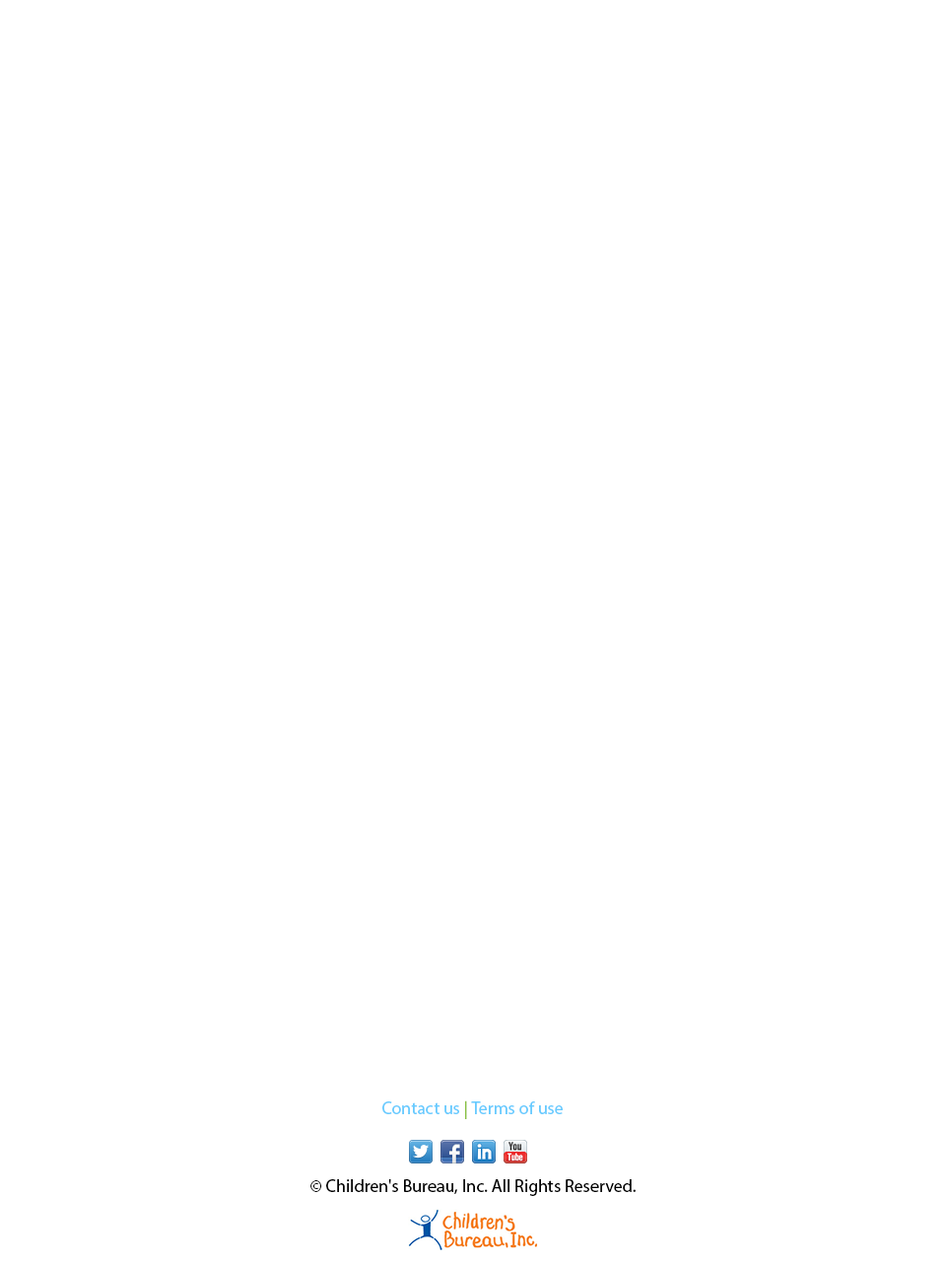
<style>
.page{position:relative;width:946px;height:1261px;background:#ffffff}
.page>*{position:absolute;margin:0}
.t1{font:17.7px "MyriadPro-Regular";color:#68cbff}
.t2{font:17.7px "MyriadPro-Regular";color:#89c041}
.t3{font:17.7px "MyriadPro-Regular";color:#000000}
</style>
<div class="page">
<p class="t1" style="left:382px;top:1100px;width:180px;height:19px;text-align:center">Contact us <span class="t2">| </span>Terms of use <br><span class="t2">Terms of S</span></p>
<p class="t3" style="left:310px;top:1179px;width:325px;height:17px;text-align:center">© Children's Bureau, Inc. All Rights Reserved.<br><br>All Rights Reserved.</p>
</div>
